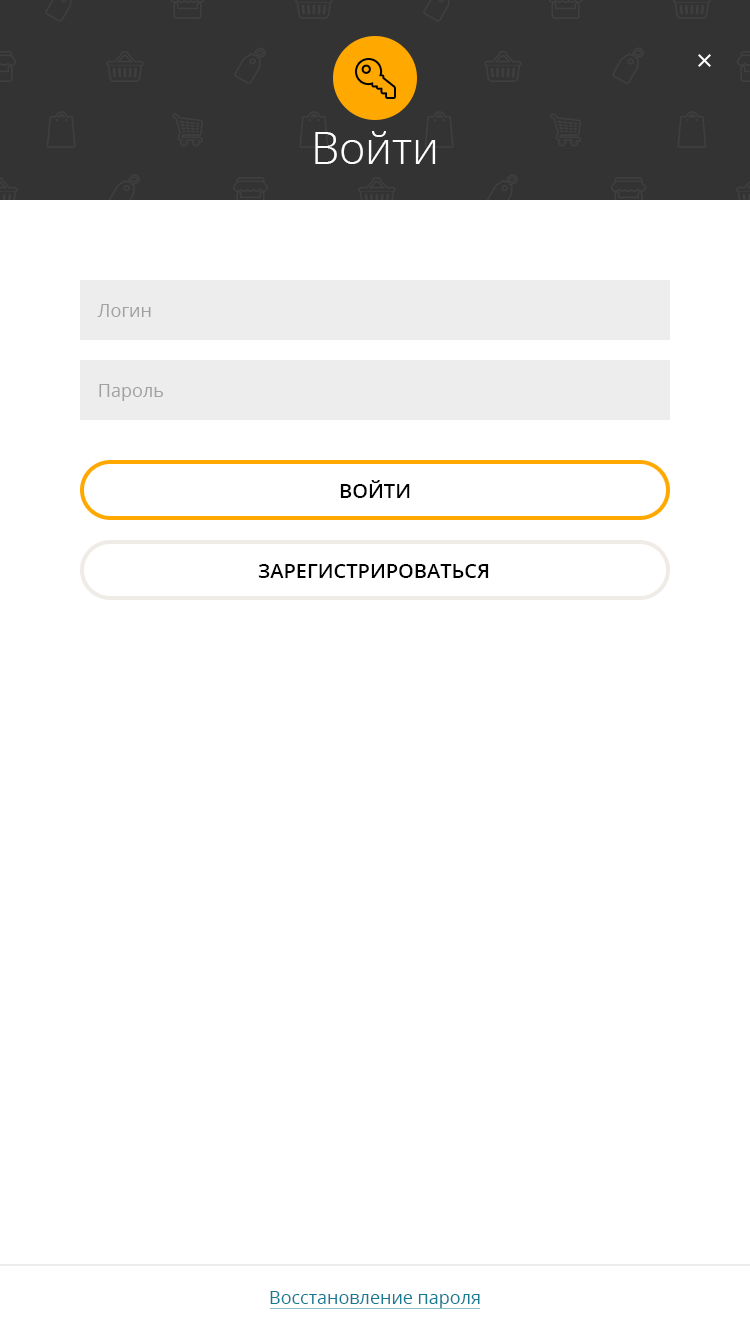
<style>
.page{position:relative;width:750px;height:1334px;background:#ffffff}
.page>*{position:absolute;margin:0}
.t1{font:45px "OpenSans-Light";color:#ffffff}
.t2{font:18px "OpenSans";color:#a1a1a1}
.t3{font:20px "OpenSans-Semibold";color:#000000;text-transform:uppercase}
.t4{font:18px "OpenSans";color:#177a93}
</style>
<div class="page">
<p class="t1" style="left:315px;top:131px;width:121px;height:33px">Войти</p>
<p class="t2" style="left:97px;top:304px;width:54px;height:13px">Логин</p>
<p class="t2" style="left:99px;top:384px;width:64px;height:17px">Пароль</p>
<p class="t3" style="left:340px;top:480px;width:70px;height:18px">войти</p>
<p class="t3" style="left:258px;top:564px;width:231px;height:14px">зарегистрироваться</p>
<p class="t4" style="left:270px;top:1291px;width:210px;height:17px">Восcтановление пароля</p>
</div>
